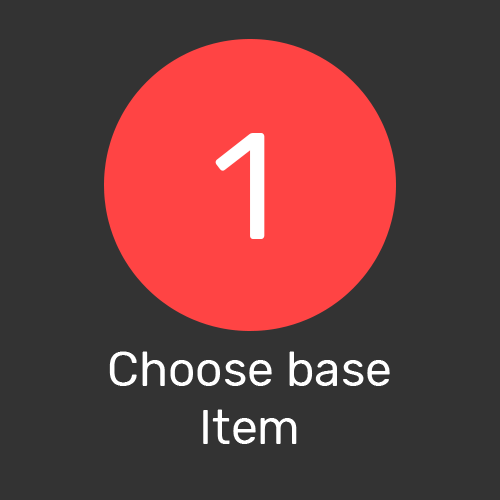
<style>
.page{position:relative;width:500px;height:500px;background:#333333}
.page>*{position:absolute;margin:0}
.t1{font:150px "Rubik-Regular";color:#ffffff}
.t2{font:48px "Rubik-Regular";color:#ffffff}
</style>
<div class="page">
<p class="t1" style="left:215px;top:133px;width:50px;height:106px">1</p>
<p class="t2" style="left:109px;top:351px;width:281px;height:93px;text-align:center">Choose base Item</p>
</div>
